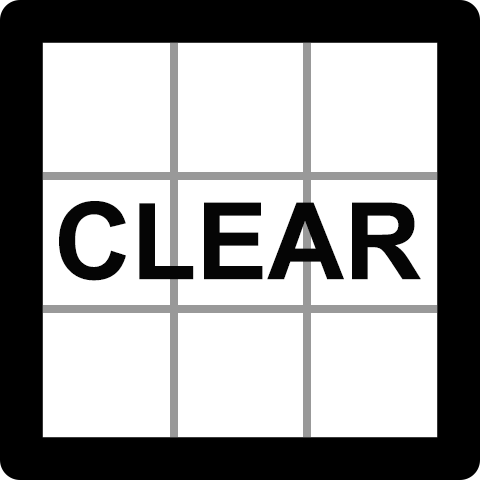
<style>
.page{position:relative;width:480px;height:480px;background:#ffffff}
.page>*{position:absolute;margin:0}
.t1{font:106.7px "Arial-BoldMT";color:#050505}
</style>
<div class="page">
<p class="t1" style="left:59px;top:201px;width:362px;height:80px">CLEAR</p>
</div>
